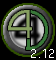
<style>
.page{position:relative;width:56px;height:60px;background:#000000}
.page>*{position:absolute;margin:0}
.t1{font:14px "Shruti";color:#ffffff}
</style>
<div class="page">
<p class="t1" style="left:31px;top:49px;width:23px;height:9px">2.12</p>
</div>
